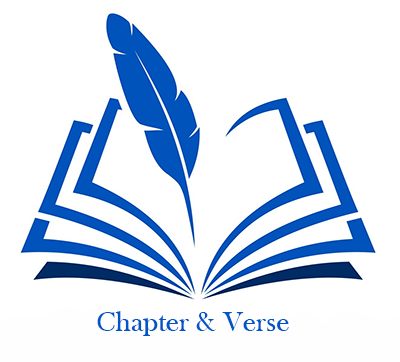
<style>
.page{position:relative;width:400px;height:362px;background:#ffffff}
.page>*{position:absolute;margin:0}
.t1{font:29px "BaskOldFace";color:#0056c7}
</style>
<div class="page">
<p class="t1" style="left:97px;top:311px;width:192px;height:25px">Chapter &amp; Verse</p>
</div>
